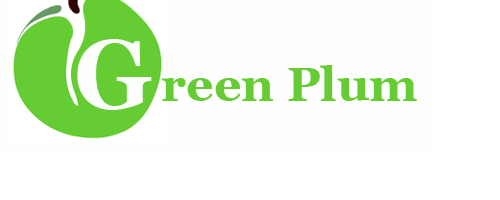
<style>
.page{position:relative;width:500px;height:200px;background:#ffffff}
.page>*{position:absolute;margin:0}
.t1{font:96px "Vani-Bold";color:#fcfefb}
.t2{font:48px "Vani-Bold";color:#66cc33}
</style>
<div class="page">
<p class="t1" style="left:77px;top:39px;width:75px;height:71px">G</p>
<p class="t2" style="left:162px;top:65px;width:255px;height:36px"><span class="t1"> </span>reen Plum</p>
</div>
